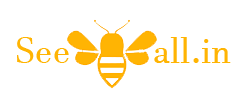
<style>
.page{position:relative;width:250px;height:103px;background:#ffffff}
.page>*{position:absolute;margin:0}
.t1{font:36px "JavaneseText";color:#ffb403}
</style>
<div class="page">
<p class="t1" style="left:17px;top:37px;width:52px;height:26px">See</p>
<p class="t1" style="left:154px;top:37px;width:77px;height:26px">all.in</p>
</div>
